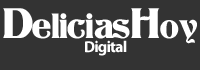
<style>
.page{position:relative;width:200px;height:70px;background:#333333}
.page>*{position:absolute;margin:0}
.t1{font:37px "Titania";letter-spacing:-0.05em;color:#ffffff}
.t2{font:45px "Titania";letter-spacing:-0.05em;color:#ffffff}
.t3{font:36px "Titania";letter-spacing:-0.05em;color:#ffffff}
.t4{font:16px "MyriadPro-Bold";letter-spacing:-0.05em;color:#ffffff}
</style>
<div class="page">
<p class="t1" style="left:3px;top:8px;width:127px;height:31px"><span class="t2">D</span>elicias</p>
<p class="t3" style="left:131px;top:8px;width:66px;height:36px"><span class="t2">H</span>oy</p>
<p class="t4" style="left:85px;top:40px;width:42px;height:16px">Digital</p>
</div>
